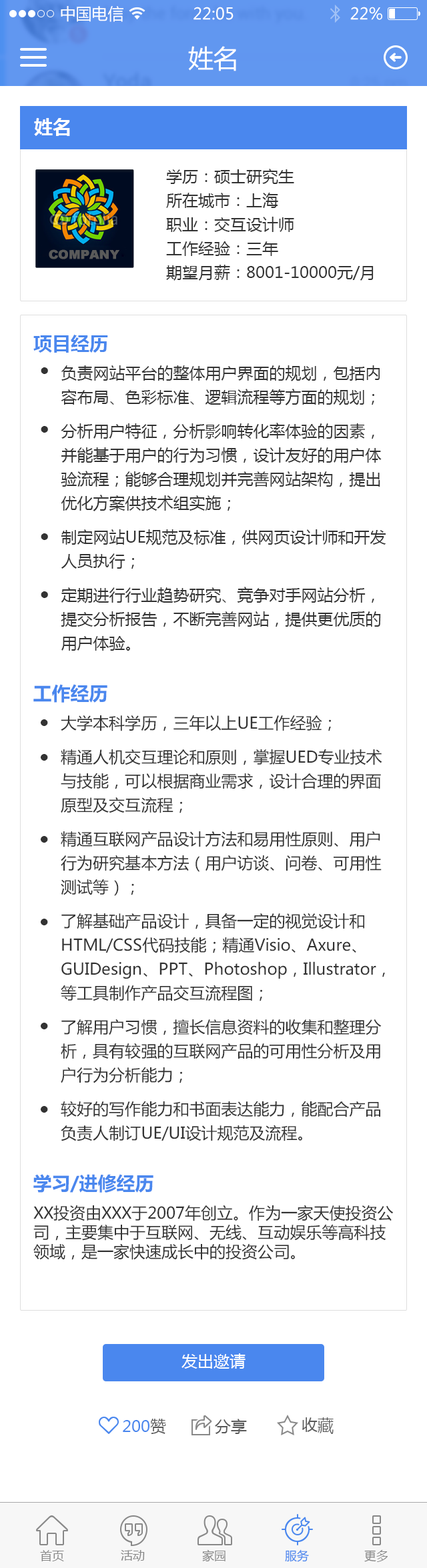
<style>
.page{position:relative;width:427px;height:1568px;background:#ffffff}
.page>*{position:absolute;margin:0}
.t1{font:16px "MicrosoftYaHei";color:#ffffff}
.t2{font:25.3px "MicrosoftYaHei";color:#ffffff}
.t3{font:18.7px "MicrosoftYaHei-Bold";color:#fefefe}
.t4{font:16px/24px "MicrosoftYaHei";color:#333333}
.t5{font:18.7px "MicrosoftYaHei-Bold";color:#4a87ee}
.t6{font:16px "MicrosoftYaHei";color:#333333}
.t7{font:16px "MicrosoftYaHei";color:#4a87ee}
.t8{font:16px "MicrosoftYaHei";color:#5a5a5a}
.t9{font:12px "MicrosoftYaHei";color:#888888}
.t10{font:12px "MicrosoftYaHei";color:#4a87ee}
</style>
<div class="page">
<p class="t1" style="left:61px;top:6px;width:62px;height:16px">中国电信</p>
<p class="t1" style="left:193px;top:7px;width:40px;height:13px">22:05</p>
<p class="t1" style="left:350px;top:7px;width:32px;height:13px">22%</p>
<p class="t2" style="left:188px;top:46px;width:48px;height:25px">姓名</p>
<p class="t3" style="left:34px;top:118px;width:36px;height:18px">姓名</p>
<p class="t4" style="left:166px;top:169px;width:207px;height:112px">学历：硕士研究生<br>所在城市：上海<br>职业：交互设计师<br>工作经验：三年<br>期望月薪：8001-10000元/月</p>
<p class="t5" style="left:33px;top:335px;width:75px;height:18px">项目经历</p>
<p class="t4" style="left:61px;top:365px;width:325px;height:286px">负责网站平台的整体用户界面的规划，包括内容布局、色彩标准、逻辑流程等方面的规划；<br>分析用户特征，分析影响转化率体验的因素，并能基于用户的行为习惯，设计友好的用户体验流程；能够合理规划并完善网站架构，提出优化方案供技术组实施；<br>制定网站UE规范及标准，供网页设计师和开发人员执行；<br>定期进行行业趋势研究、竞争对手网站分析，提交分析报告，不断完善网站，提供更优质的用户体验。</p>
<p class="t5" style="left:33px;top:684px;width:74px;height:19px">工作经历</p>
<p class="t4" style="left:61px;top:715px;width:324px;height:426px">大学本科学历，三年以上UE工作经验； <br>精通人机交互理论和原则，掌握UED专业技术与技能，可以根据商业需求，设计合理的界面原型及交互流程； <br>精通互联网产品设计方法和易用性原则、用户行为研究基本方法（用户访谈、问卷、可用性测试等）；<br>了解基础产品设计，具备一定的视觉设计和HTML/CSS代码技能；精通Visio、Axure、GUIDesign、PPT、Photoshop，Illustrator，等工具制作产品交互流程图； <br>了解用户习惯，擅长信息资料的收集和整理分析，具有较强的互联网产品的可用性分析及用户行为分析能力； <br>较好的写作能力和书面表达能力，能配合产品负责人制订UE/UI设计规范及流程。</p>
<p class="t5" style="left:33px;top:1174px;width:120px;height:19px">学习/进修经历</p>
<p class="t6" style="left:33px;top:1205px;width:360px;height:55px">XX投资由XXX于2007年创立。作为一家天使投资公司，主要集中于互联网、无线、互动娱乐等高科技领域，是一家快速成长中的投资公司。</p>
<p class="t1" style="left:181px;top:1353px;width:64px;height:16px">发出邀请</p>
<p class="t7" style="left:123px;top:1419px;width:43px;height:15px">200<span class="t8">赞</span></p>
<p class="t8" style="left:215px;top:1419px;width:32px;height:15px">分享</p>
<p class="t8" style="left:302px;top:1417px;width:31px;height:17px">收藏</p>
<p class="t9" style="left:40px;top:1550px;width:24px;height:11px">首页</p>
<p class="t9" style="left:121px;top:1550px;width:24px;height:11px">活动</p>
<p class="t9" style="left:202px;top:1549px;width:23px;height:13px">家园</p>
<p class="t10" style="left:285px;top:1549px;width:24px;height:13px">服务</p>
<p class="t9" style="left:364px;top:1550px;width:23px;height:12px">更多</p>
</div>
